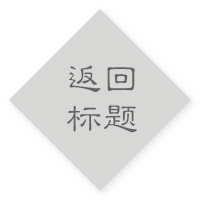
<style>
.page{position:relative;width:205px;height:204px;background:#ffffff}
.page>*{position:absolute;margin:0}
.t1{font:37.4px/40px "FZLBJW--GB1-0";color:#646464}
</style>
<div class="page">
<p class="t1" style="left:67px;top:65px;width:70px;height:68px;text-align:justify">返回<br>标题</p>
</div>
